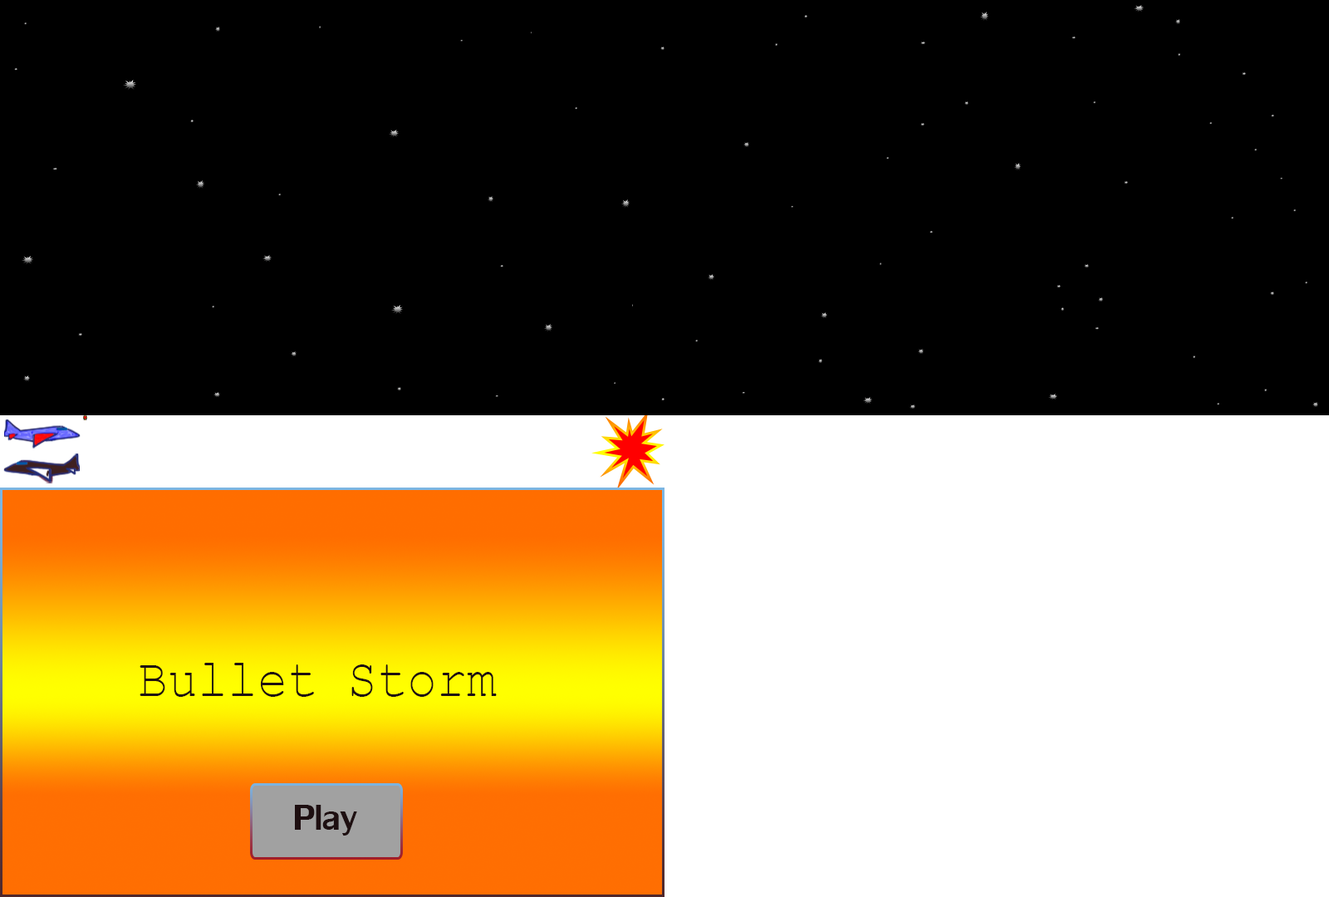
<style>
.page{position:relative;width:1329px;height:897px;background:#000000}
.page>*{position:absolute;margin:0}
.t1{font:53.8px "MiriamFixed";color:#1e0f11;scale:0.93 1}
.t2{font:53.8px "LilyUPC";color:#1e0f11}
</style>
<div class="page">
<p class="t1" style="left:140px;top:663px;width:357px;height:34px">Bullet Storm</p>
<p class="t2" style="left:295px;top:805px;width:62px;height:31px">Play</p>
</div>
